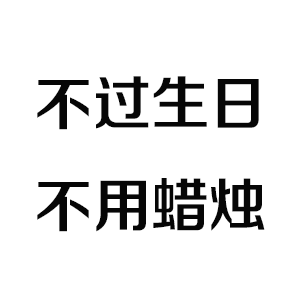
<style>
.page{position:relative;width:300px;height:300px;background:#ffffff}
.page>*{position:absolute;margin:0}
.t1{font:58.3px "FZZZHONGJW--GB1-0";color:#060606;text-transform:uppercase}
</style>
<div class="page">
<p class="t1" style="left:37px;top:76px;width:228px;height:156px;text-align:center">不过生日<br>不用蜡烛</p>
</div>
